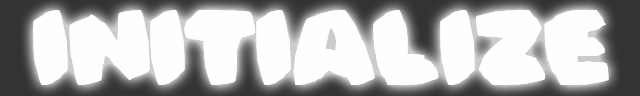
<style>
.page{position:relative;width:640px;height:96px;background:#fefefe}
.page>*{position:absolute;margin:0}
.t1{font:100px "Bomberman";color:#fefefe}
</style>
<div class="page">
<p class="t1" style="left:33px;top:10px;width:576px;height:75px">Initialize</p>
<p class="t1" style="left:33px;top:10px;width:576px;height:75px">Initialize</p>
</div>
